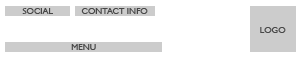
<style>
.page{position:relative;width:300px;height:60px;background:#ffffff}
.page>*{position:absolute;margin:0}
.t1{font:9px "GillSansMT";color:#474747;text-transform:uppercase}
</style>
<div class="page">
<p class="t1" style="left:22px;top:8px;width:31px;height:6px">social</p>
<p class="t1" style="left:81px;top:8px;width:67px;height:6px">CONTACT INFO</p>
<p class="t1" style="left:260px;top:27px;width:26px;height:6px">LOGO</p>
<p class="t1" style="left:71px;top:44px;width:25px;height:6px">menu</p>
</div>
